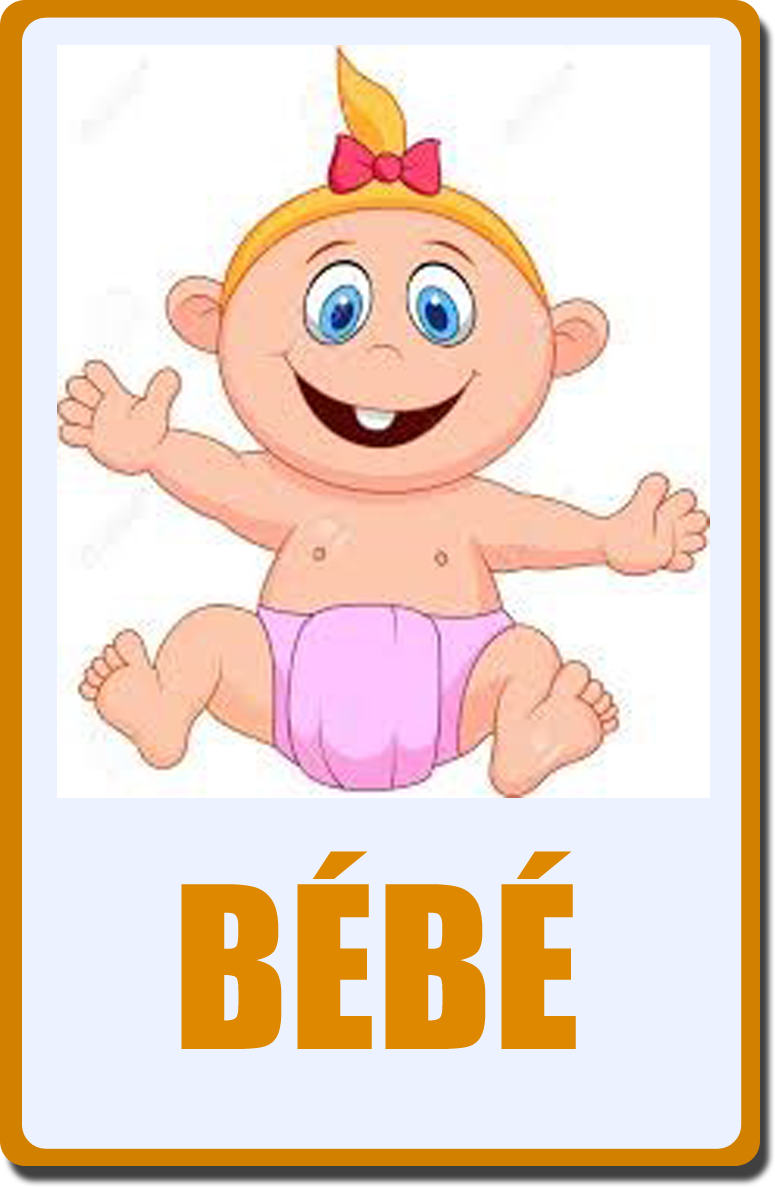
<style>
.page{position:relative;width:775px;height:1187px;background:#ecf2ff}
.page>*{position:absolute;margin:0}
.t1{font:208.3px "Impact";letter-spacing:0.005em;color:#de8800}
</style>
<div class="page">
<p class="t1" style="left:181px;top:851px;width:395px;height:198px">BÉBÉ</p>
</div>
